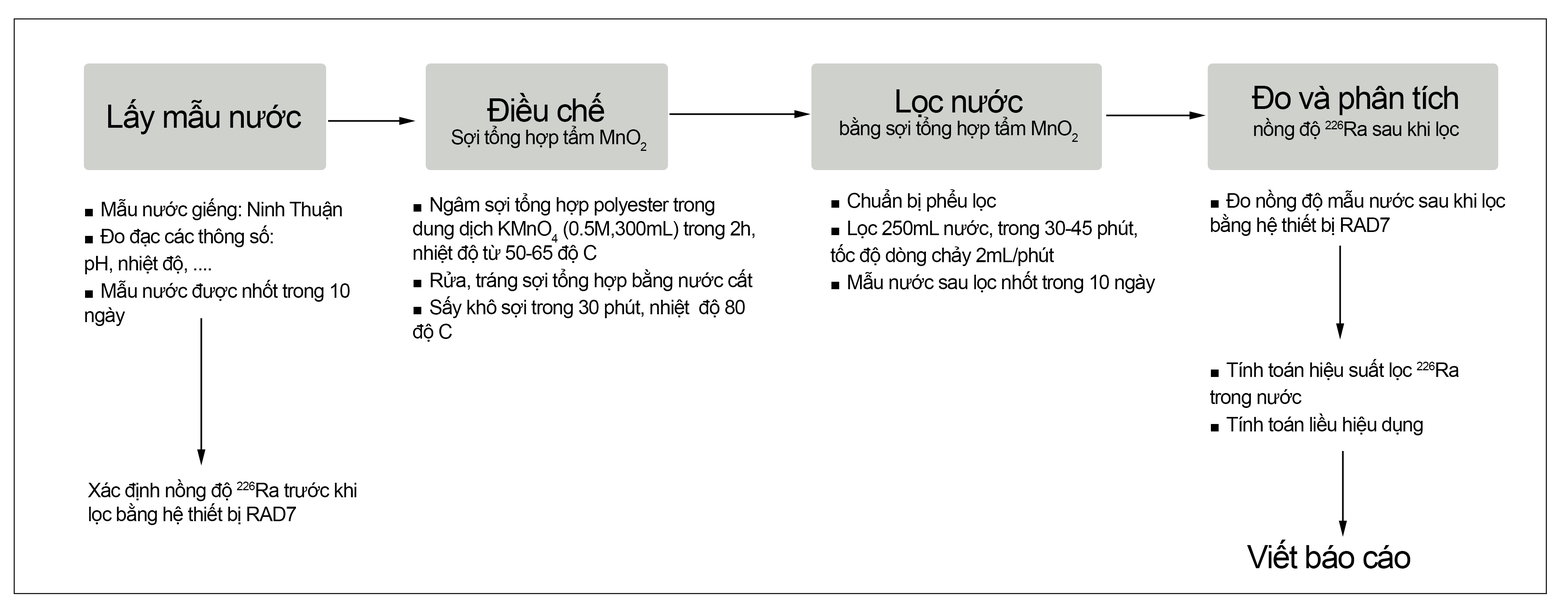
<style>
.page{position:relative;width:1568px;height:616px;background:#ffffff}
.page>*{position:absolute;margin:0}
.t1{font:20.2px "ArialMT";letter-spacing:-0.04em;color:#020002}
.t2{font:32.3px "ArialMT";letter-spacing:-0.04em;color:#020002}
.t3{font:16.8px "TimesNewRomanPSMT";letter-spacing:-0.04em;color:#020002}
</style>
<div class="page">
<p class="t1" style="left:840px;top:89px;width:238px;height:53px;text-align:center"><span class="t2">Lọc nước <br></span>bằng sợi tổng hợp tẩm MnO2</p>
<p class="t1" style="left:1252px;top:86px;width:207px;height:54px;text-align:center"><span class="t2">Đo và phân tích<br></span>nồng độ 226Ra sau khi lọc</p>
<p class="t2" style="left:108px;top:99px;width:193px;height:35px">Lấy mẫu nước</p>
<p class="t1" style="left:452px;top:93px;width:194px;height:58px;text-align:center"><span class="t2">Điều chế<br></span> Sợi tổng hợp tẩm MnO2</p>
<p class="t1" style="left:413px;top:193px;width:342px;height:149px"><span class="t3">■  </span>Ngâm sợi tổng hợp polyester trong dung dịch KMnO4 (0.5M,300mL) trong 2h, nhiệt độ từ 50-65 độ C<br><span class="t3">■  </span>Rửa, tráng sợi tổng hợp bằng nước cất<br><span class="t3">■  </span>Sấy khô sợi trong 30 phút, nhiệt  độ 80 độ C</p>
<p class="t1" style="left:830px;top:189px;width:325px;height:104px"><span class="t3">■  </span>Chuẩn bị phểu lọc<br><span class="t3">■  </span>Lọc 250mL nước, trong 30-45 phút, <br>tốc độ dòng chảy 2mL/phút<br><span class="t3">■  </span>Mẫu nước sau lọc nhốt trong 10 ngày</p>
<p class="t1" style="left:1211px;top:190px;width:294px;height:46px"><span class="t3">■  </span>Đo nồng độ mẫu nước sau khi lọc bằng hệ thiết bị RAD7</p>
<p class="t1" style="left:85px;top:198px;width:265px;height:128px"><span class="t3">■  </span>Mẫu nước giếng: Ninh Thuận<br><span class="t3">■  </span>Đo đạc các thông số: <br>pH, nhiệt độ, ....<br><span class="t3">■  </span>Mẫu nước được nhốt trong 10 ngày</p>
<p class="t1" style="left:1210px;top:359px;width:249px;height:77px"><span class="t3">■  </span>Tính toán hiệu suất lọc 226Ra <br>trong nước<br><span class="t3">■  </span>Tính toán liều hiệu dụng</p>
<p class="t1" style="left:88px;top:479px;width:268px;height:46px">Xác định nồng độ 226Ra trước khi lọc bằng hệ thiết bị RAD7</p>
<p class="t2" style="left:1247px;top:540px;width:163px;height:29px">Viết báo cáo</p>
</div>
